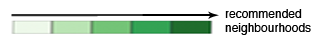
<style>
.page{position:relative;width:321px;height:35px;background:#ffffff}
.page>*{position:absolute;margin:0}
.t1{font:12px "Helvetica";color:#000000}
</style>
<div class="page">
<p class="t1" style="left:225px;top:9px;width:86px;height:26px">recommended <br>neighbourhoods</p>
</div>
